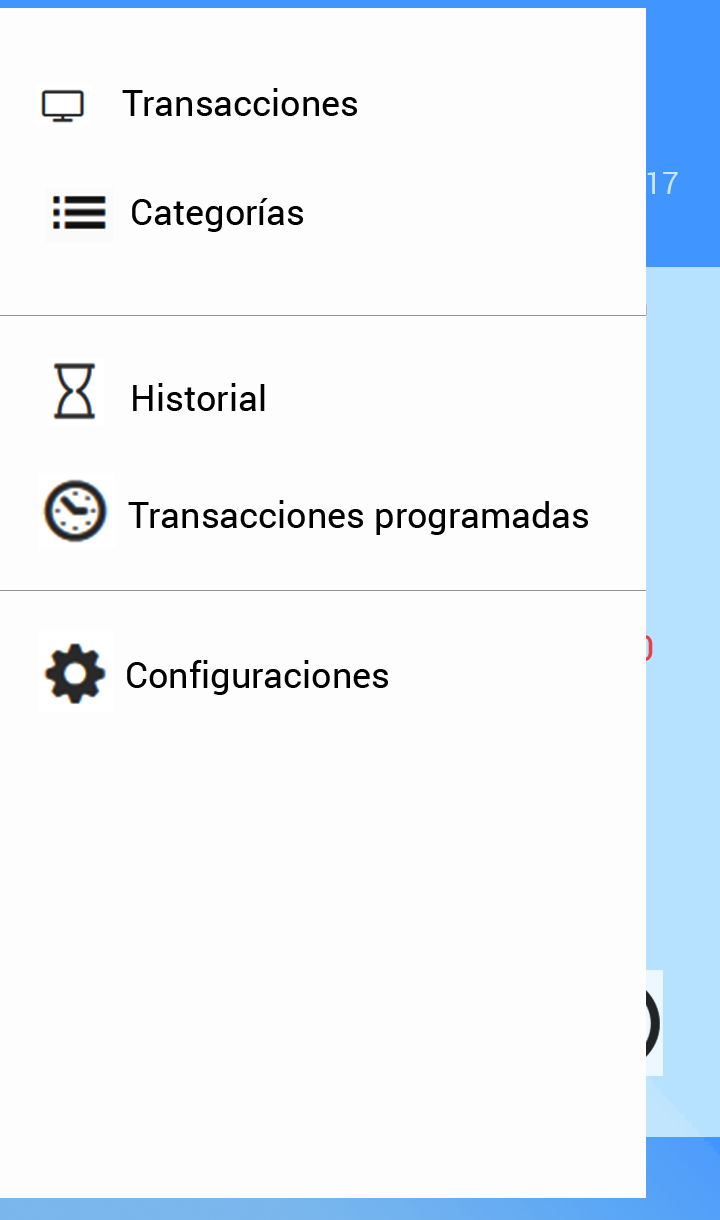
<style>
.page{position:relative;width:720px;height:1220px;background:#fdfdfd}
.page>*{position:absolute;margin:0}
.t1{font:36px "Roboto-Regular";color:#000000}
</style>
<div class="page">
<p class="t1" style="left:122px;top:88px;width:235px;height:28px">Transacciones</p>
<p class="t1" style="left:132px;top:198px;width:171px;height:34px">Categorías</p>
<p class="t1" style="left:133px;top:383px;width:132px;height:28px">Historial</p>
<p class="t1" style="left:128px;top:500px;width:460px;height:35px">Transacciones programadas</p>
<p class="t1" style="left:127px;top:660px;width:261px;height:35px">Configuraciones</p>
</div>
